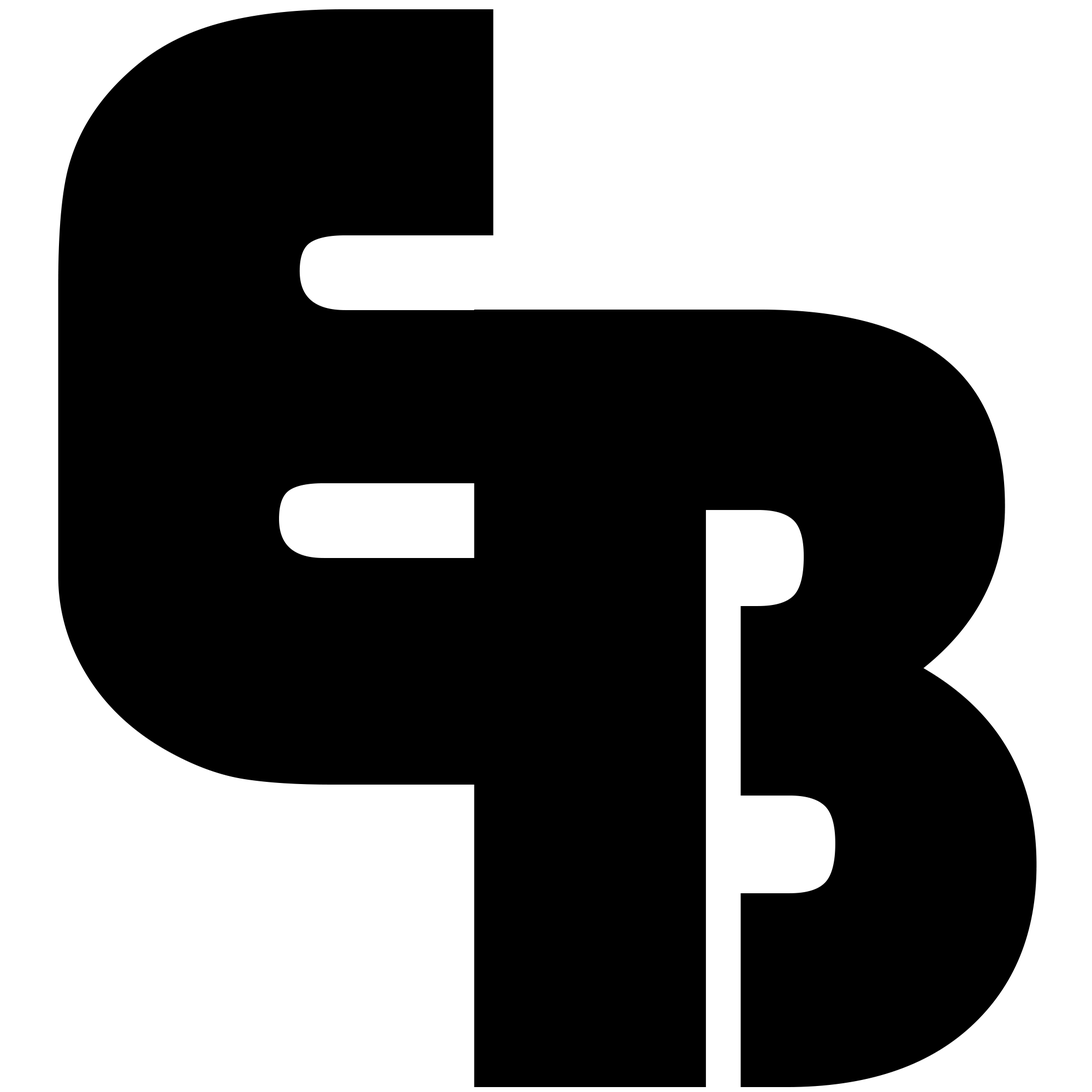
<style>
.page{position:relative;width:1092px;height:1092px;background:#000000}
.page>*{position:absolute;margin:0}
.t1{font:1087.5px "Blippo-BlkBT";color:#000000}
</style>
<div class="page">
<p class="t1" style="left:58px;top:9px;width:436px;height:776px">E</p>
<p class="t1" style="left:474px;top:310px;width:563px;height:777px">B</p>
</div>
